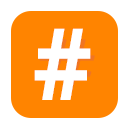
<style>
.page{position:relative;width:128px;height:128px;background:#ff8400}
.page>*{position:absolute;margin:0}
.t1{font:100.1px "OpenSans-Bold";color:#ffffff;scale:0.91 1}
.t2{font:82px "SegoeUI";color:#ffffff;font-weight:bold;scale:1.27 1}
</style>
<div class="page">
<p class="t1" style="left:34px;top:28px;width:57px;height:72px">#</p>
<p class="t2" style="left:36px;top:39px;width:59px;height:54px">#</p>
</div>
